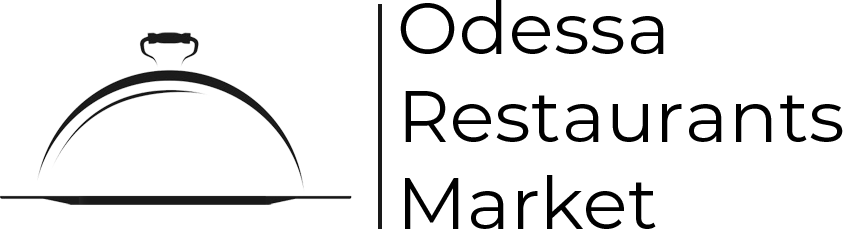
<style>
.page{position:relative;width:845px;height:229px;background:#ffffff}
.page>*{position:absolute;margin:0}
.t1{font:73px "Montserrat-Regular";letter-spacing:0.01em;color:#000000}
</style>
<div class="page">
<p class="t1" style="left:400px;top:0px;width:443px;height:229px">Odessa Restaurants Market</p>
</div>
